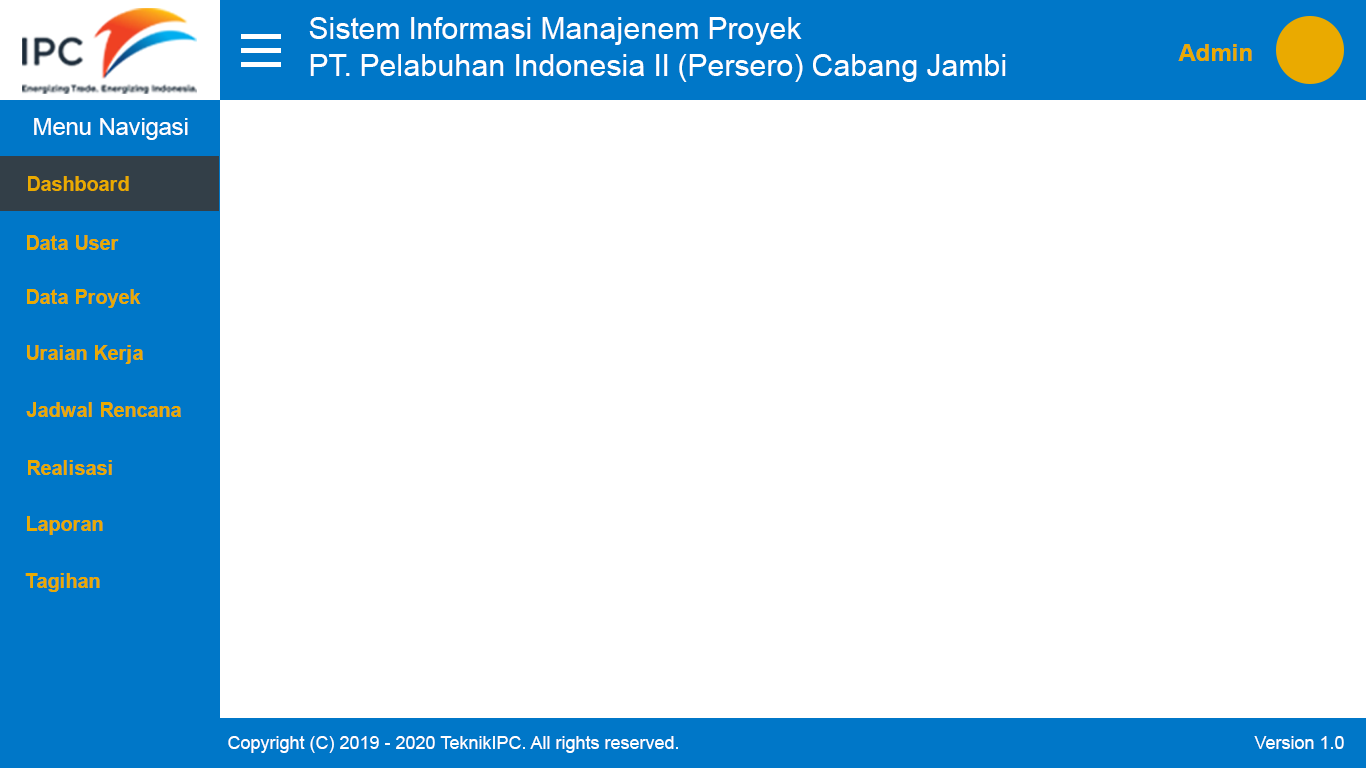
<style>
.page{position:relative;width:1366px;height:768px;background:#ffffff}
.page>*{position:absolute;margin:0}
.t1{font:30px "ArialMT";color:#ffffff}
.t2{font:24px "Arial-BoldMT";color:#eaaa00}
.t3{font:24px "ArialMT";color:#ffffff}
.t4{font:20px "Arial-BoldMT";color:#eaaa00}
.t5{font:18px "ArialMT";color:#ffffff}
</style>
<div class="page">
<p class="t1" style="left:309px;top:17px;width:493px;height:28px">Sistem Informasi Manajenem Proyek</p>
<p class="t1" style="left:310px;top:54px;width:696px;height:28px">PT. Pelabuhan Indonesia II (Persero) Cabang Jambi</p>
<p class="t2" style="left:1178px;top:44px;width:74px;height:17px">Admin</p>
<p class="t3" style="left:34px;top:118px;width:154px;height:22px">Menu Navigasi</p>
<p class="t4" style="left:28px;top:176px;width:101px;height:15px">Dashboard</p>
<p class="t4" style="left:27px;top:235px;width:92px;height:15px">Data User</p>
<p class="t4" style="left:27px;top:289px;width:114px;height:19px">Data Proyek</p>
<p class="t4" style="left:27px;top:345px;width:116px;height:19px">Uraian Kerja</p>
<p class="t4" style="left:26px;top:402px;width:155px;height:15px">Jadwal Rencana</p>
<p class="t4" style="left:28px;top:460px;width:84px;height:15px">Realisasi</p>
<p class="t4" style="left:27px;top:516px;width:76px;height:19px">Laporan</p>
<p class="t4" style="left:25px;top:573px;width:75px;height:19px">Tagihan</p>
<p class="t5" style="left:228px;top:736px;width:450px;height:17px">Copyright (C) 2019 - 2020 TeknikIPC. All rights reserved.</p>
<p class="t5" style="left:1254px;top:736px;width:90px;height:13px">Version 1.0</p>
</div>
